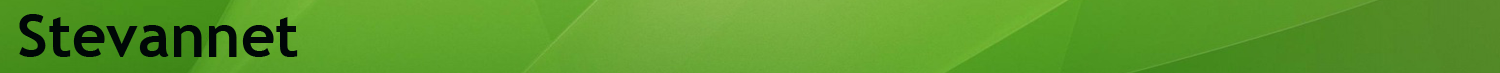
<style>
.page{position:relative;width:1500px;height:73px}
.page>*{position:absolute;margin:0}
.t1{font:60px "TrebuchetMS-Bold";color:#000707}
</style>
<div class="page">
<p class="t1" style="left:19px;top:14px;width:279px;height:43px">Stevannet</p>
</div>
